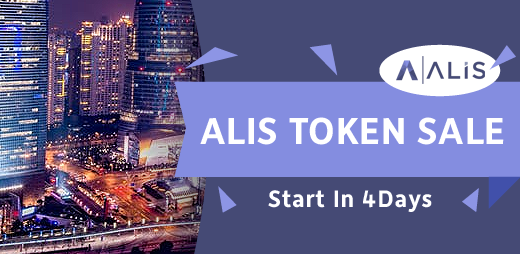
<style>
.page{position:relative;width:520px;height:254px;background:#454a75}
.page>*{position:absolute;margin:0}
.t1{font:38px "Depot-Bold";letter-spacing:0.02em;color:#ffffff}
.t2{font:24px "Depot-Bold";letter-spacing:0.04em;color:#ffffff}
</style>
<div class="page">
<p class="t1" style="left:200px;top:117px;width:304px;height:28px">ALIS TOKEN SALE</p>
<p class="t2" style="left:268px;top:190px;width:164px;height:22px">Start In 4Days</p>
</div>
